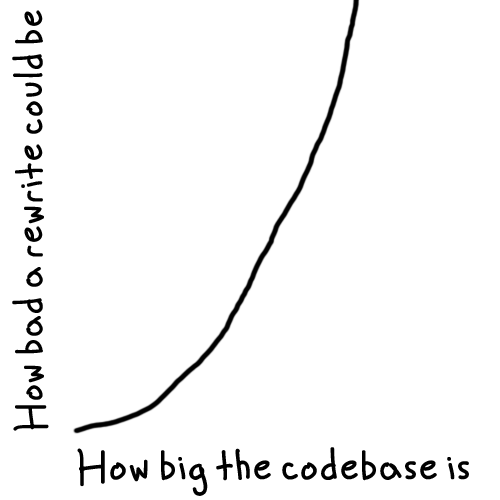
<style>
.page{position:relative;width:500px;height:500px;background:#ffffff}
.page>*{position:absolute;margin:0}
.t1{font:44.8px "ComicDans";color:#000000}
.t2{font:48px "ComicDans";color:#000000}
</style>
<div class="page">
<p class="t1" style="left:12px;top:10px;width:37px;height:421px;rotate:-90deg">How bad a rewrite could be</p>
<p class="t2" style="left:77px;top:447px;width:392px;height:49px">How big the codebase is</p>
</div>
